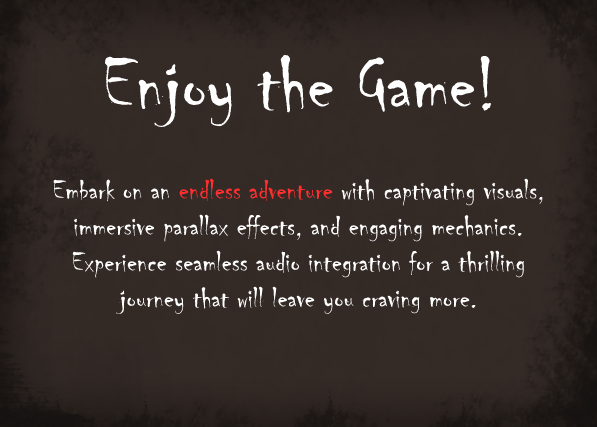
<style>
.page{position:relative;width:597px;height:427px;background:#342b27}
.page>*{position:absolute;margin:0}
.t1{font:80px "Chiller-Regular";color:#ffffff}
.t2{font:30px "Chiller-Regular";color:#ffffff}
.t3{font:30px "Chiller-Regular";color:#ff2f2f}
</style>
<div class="page">
<p class="t1" style="left:105px;top:54px;width:386px;height:73px">Enjoy the Game!</p>
<p class="t2" style="left:53px;top:178px;width:490px;height:137px;text-align:center">Embark on an <span class="t3">endless adventure</span> with captivating visuals, immersive parallax effects, and engaging mechanics. Experience seamless audio integration for a thrilling journey that will leave you craving more.</p>
</div>
